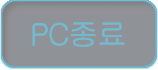
<style>
.page{position:relative;width:158px;height:70px;background:#8f9297}
.page>*{position:absolute;margin:0}
.t1{font:30px "Gulim";letter-spacing:-0.04em;color:#6bbdd5}
</style>
<div class="page">
<p class="t1" style="left:32px;top:22px;width:93px;height:25px">PC종료</p>
</div>
